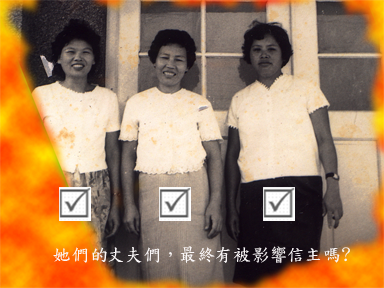
<style>
.page{position:relative;width:384px;height:288px}
.page>*{position:absolute;margin:0}
.t1{font:18px "DFKaiShu-SB-Estd-BF";color:#faf7f8}
</style>
<div class="page">
<p class="t1" style="left:53px;top:246px;width:297px;height:18px">她們的丈夫們，最終有被影響信主嗎?</p>
</div>
